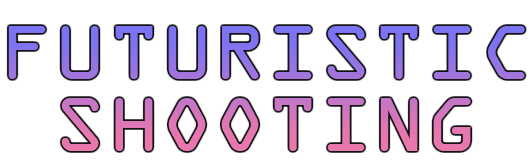
<style>
.page{position:relative;width:532px;height:168px;background:#ffffff}
.page>*{position:absolute;margin:0}
.t1{font:82px/72px "OCRAExtended";scale:1.07 1}
</style>
<div class="page">
<p class="t1" style="left:8px;top:26px;width:517px;height:125px">FUTURISTIC<br> SHOOTING</p>
</div>
